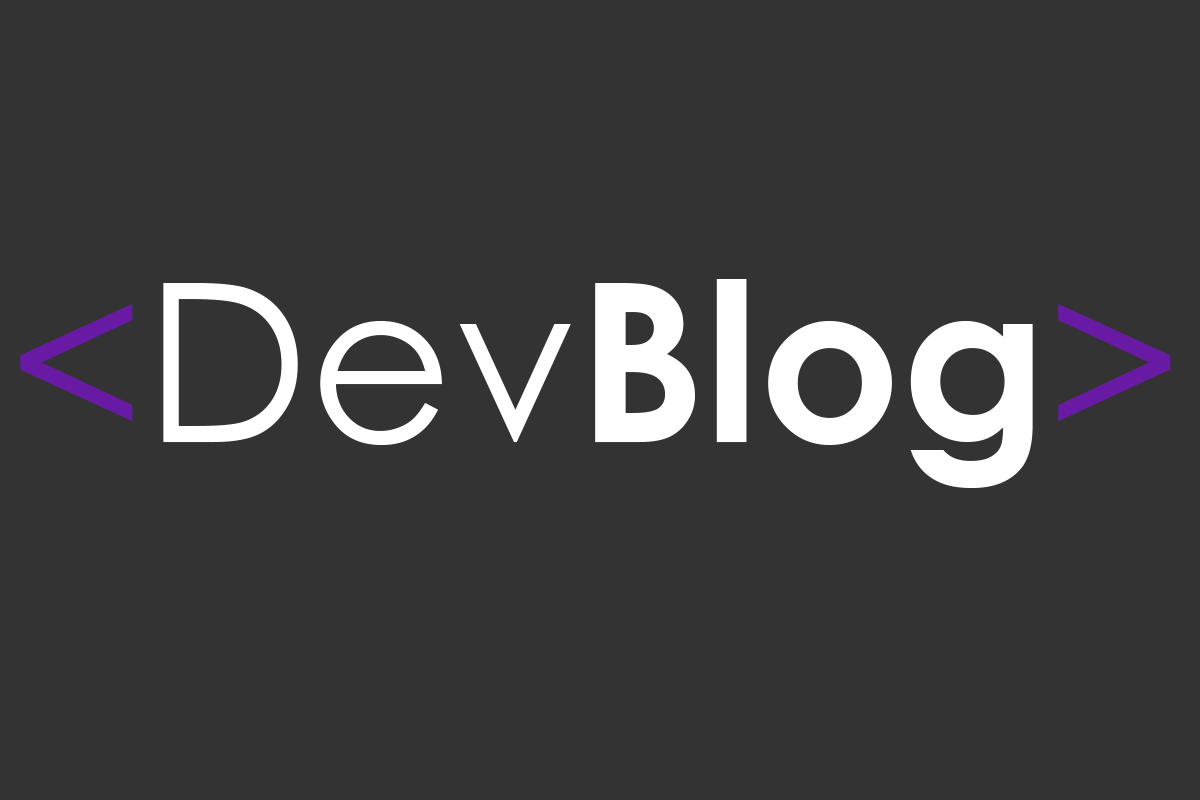
<style>
.page{position:relative;width:1200px;height:800px;background:#333333}
.page>*{position:absolute;margin:0}
.t1{font:222px "CenturyGothic-Bold";color:#ffffff}
.t2{font:222px "CenturyGothic";color:#681aa5}
.t3{font:222px "CenturyGothic";color:#ffffff}
</style>
<div class="page">
<p class="t1" style="left:20px;top:279px;width:1151px;height:209px"><span class="t2">&lt;</span><span class="t3">Dev</span>Blog<span class="t2">&gt;</span></p>
</div>
